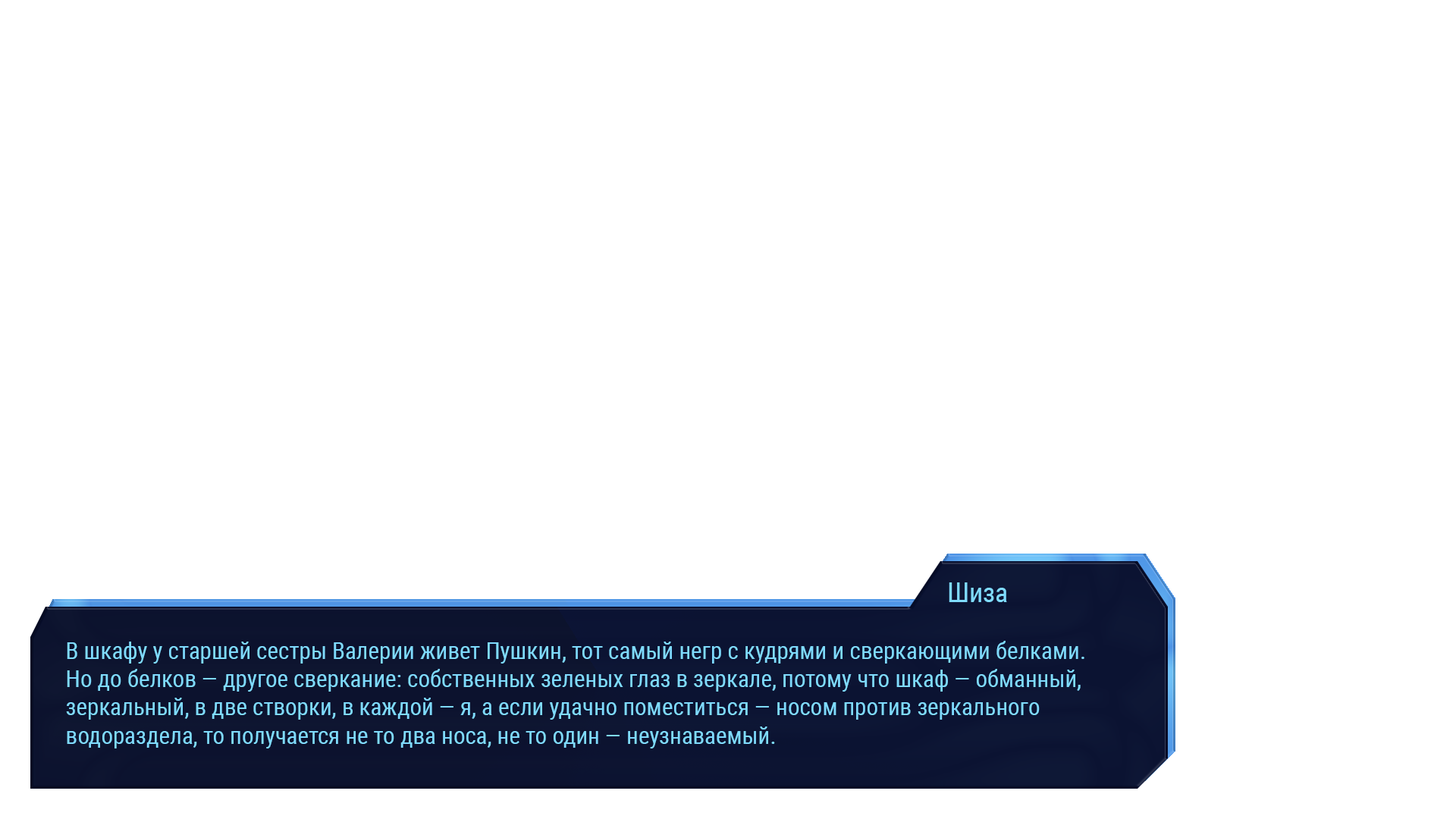
<style>
.page{position:relative;width:1456px;height:819px;background:#ffffff}
.page>*{position:absolute;margin:0}
.t1{font:27.3px "RobotoCondensed-Regular";color:#7fdbff}
.t2{font:23.5px "RobotoCondensed-Regular";color:#7fdbff}
</style>
<div class="page">
<p class="t1" style="left:949px;top:582px;width:58px;height:20px">Шиза</p>
<p class="t2" style="left:66px;top:641px;width:1018px;height:107px">В шкафу у старшей сестры Валерии живет Пушкин, тот самый негр с кудрями и сверкающими белками. Но до белков — другое сверкание: собственных зеленых глаз в зеркале, потому что шкаф — обманный, зеркальный, в две створки, в каждой — я, а если удачно поместиться — носом против зеркального водораздела, то получается не то два носа, не то один — неузнаваемый.</p>
</div>
